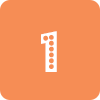
<style>
.page{position:relative;width:100px;height:100px;background:#f68d55}
.page>*{position:absolute;margin:0}
.t1{font:62.9px "BudmoJiggler-Regular";color:#ffffff;text-transform:uppercase}
</style>
<div class="page">
<p class="t1" style="left:41px;top:31px;width:16px;height:41px">1</p>
</div>
